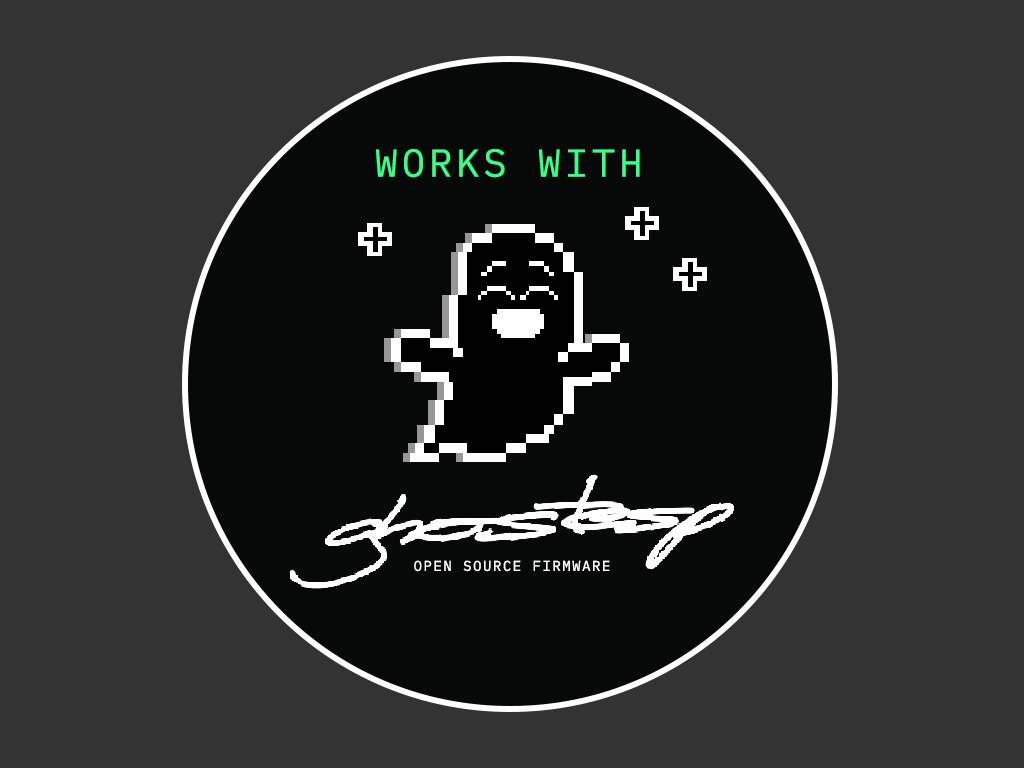
<style>
.page{position:relative;width:1024px;height:768px;background:#333333}
.page>*{position:absolute;margin:0}
.t1{font:38.8px "IBMPlexMono-Regular";letter-spacing:0.1em;color:#39ff88}
.t2{font:14.2px "IBMPlexMono-Regular";letter-spacing:0.1em;color:#ffffff}
</style>
<div class="page">
<p class="t1" style="left:376px;top:149px;width:264px;height:29px">WORKS WITH</p>
<p class="t2" style="left:414px;top:560px;width:196px;height:12px">OPEN SOURCE FIRMWARE</p>
</div>
